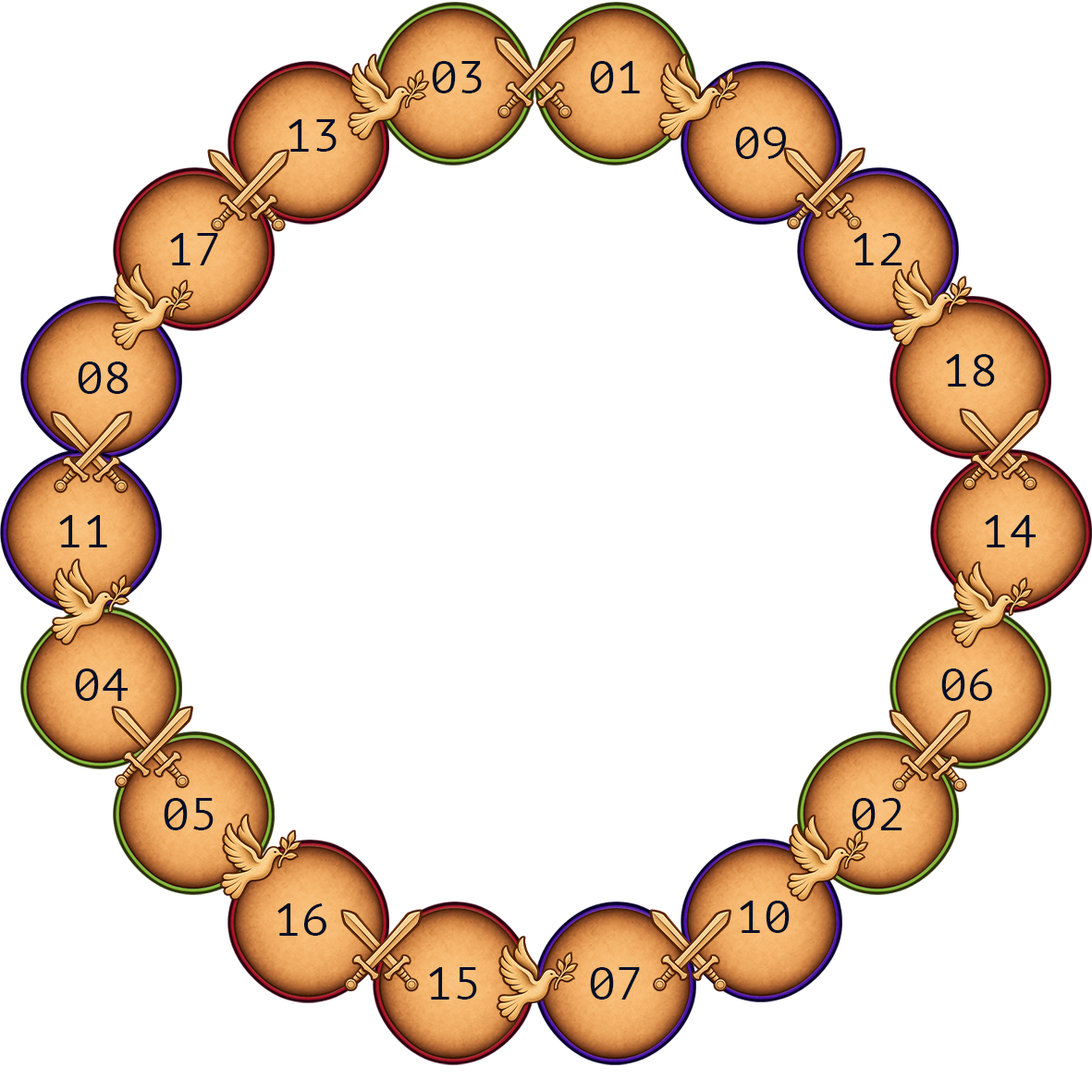
<style>
.page{position:relative;width:1092px;height:1092px;background:#ffffff}
.page>*{position:absolute;margin:0}
.t1{font:46.2px "PTMono-Regular";letter-spacing:-0.01em;color:#020e26}
</style>
<div class="page">
<p class="t1" style="left:432px;top:61px;width:50px;height:32px">03</p>
<p class="t1" style="left:590px;top:61px;width:50px;height:32px">01</p>
<p class="t1" style="left:288px;top:119px;width:49px;height:33px">13</p>
<p class="t1" style="left:735px;top:127px;width:51px;height:32px">09</p>
<p class="t1" style="left:170px;top:233px;width:48px;height:32px">17</p>
<p class="t1" style="left:853px;top:233px;width:49px;height:32px">12</p>
<p class="t1" style="left:78px;top:362px;width:51px;height:32px">08</p>
<p class="t1" style="left:946px;top:354px;width:49px;height:32px">18</p>
<p class="t1" style="left:59px;top:515px;width:48px;height:32px">11</p>
<p class="t1" style="left:985px;top:515px;width:51px;height:32px">14</p>
<p class="t1" style="left:75px;top:669px;width:53px;height:32px">04</p>
<p class="t1" style="left:941px;top:669px;width:51px;height:32px">06</p>
<p class="t1" style="left:164px;top:798px;width:50px;height:32px">05</p>
<p class="t1" style="left:852px;top:798px;width:50px;height:32px">02</p>
<p class="t1" style="left:277px;top:903px;width:49px;height:33px">16</p>
<p class="t1" style="left:740px;top:901px;width:50px;height:32px">10</p>
<p class="t1" style="left:429px;top:967px;width:48px;height:33px">15</p>
<p class="t1" style="left:590px;top:967px;width:50px;height:33px">07</p>
</div>
